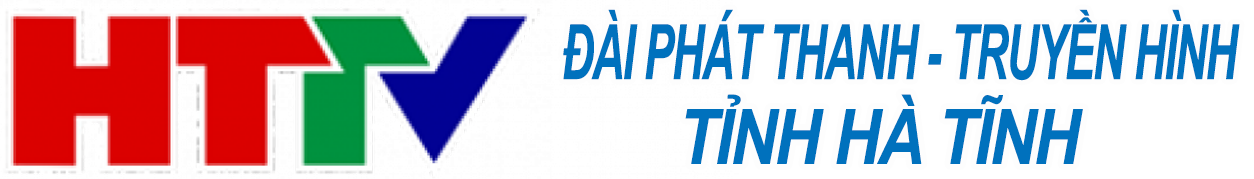
<style>
.page{position:relative;width:1254px;height:179px;background:#ffffff}
.page>*{position:absolute;margin:0}
.t1{font:76.6px "Arial-BoldItalicMT";letter-spacing:-0.04em;color:#0071bd;scale:0.58 1}
.t2{font:76.6px "Arial-BoldItalicMT";letter-spacing:-0.04em;color:#0071bd;scale:0.84 1}
</style>
<div class="page">
<p class="t1" style="left:563px;top:9px;width:677px;height:72px">ĐÀI PHÁT THANH - TRUYỀN HÌNH</p>
<p class="t2" style="left:685px;top:94px;width:398px;height:70px">TỈNH HÀ TĨNH</p>
</div>
